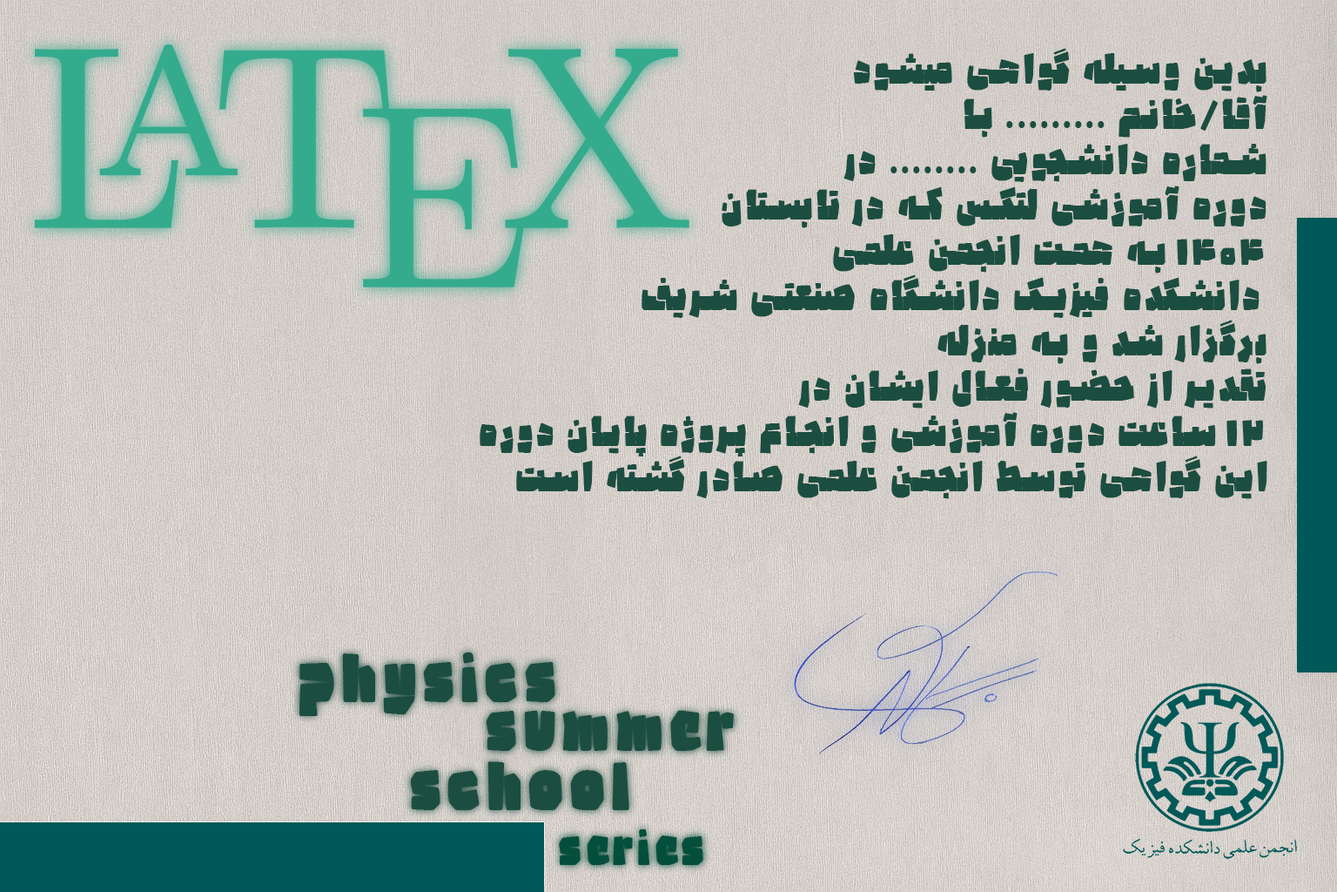
<style>
.page{position:relative;width:1337px;height:892px}
.page>*{position:absolute;margin:0}
.t1{font:34.5px/45.3px "Potk-Black";letter-spacing:0.1em;color:#1b4e40;scale:0.91 1}
.t2{font:62.7px/108.4px "Potk-Black";letter-spacing:0.1em;color:#1b4e40;scale:0.91 1}
.t3{font:62.7px "Potk-Black";letter-spacing:0.1em;color:#1b4e40;scale:0.91 1}
.t4{font:45.3px "Potk-Black";letter-spacing:0.1em;color:#044f3b;scale:0.91 1}
</style>
<div class="page">
<p class="t1" style="left:480px;top:48px;width:788px;height:451px;text-align:right">بدین وسیله گواهی میشود<br> آقا/خانم ......... با<br> شماره دانشجویی ........ در<br>دوره آموزشی لتکس که در تابستان<br> 1404 به همت انجمن علمی<br>دانشکده فیزیک دانشگاه صنعتی شریف <br>برگزار شد و به منزله<br> تقدیر از حضور فعال ایشان در<br>12 ساعت دوره آموزشی و انجام پروژه پایان دوره<br> این گواهی توسط انجمن علمی صادر گشته است</p>
<p class="t2" style="left:299px;top:652px;width:331px;height:158px;text-align:right">physics      <br>  school</p>
<p class="t3" style="left:486px;top:710px;width:248px;height:41px">summer</p>
<p class="t4" style="left:559px;top:828px;width:145px;height:37px">series</p>
</div>
